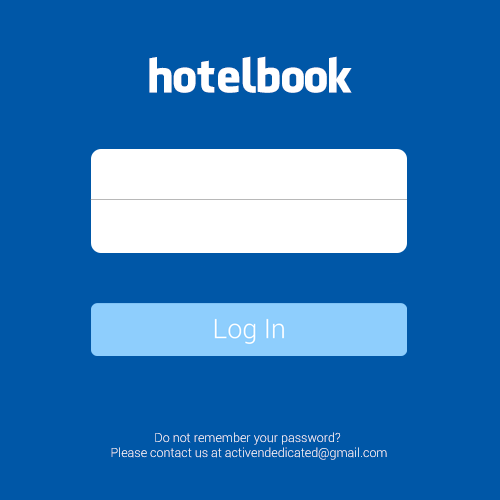
<style>
.page{position:relative;width:500px;height:500px;background:#0057a7}
.page>*{position:absolute;margin:0}
.t1{font:45.8px "FacebookLetterFaces";color:#ffffff}
.t2{font:12.5px "Roboto-Light";color:#ffffff}
</style>
<div class="page">
<p class="t1" style="left:149px;top:56px;width:203px;height:37px">hotelbook</p>
<p class="t2" style="left:111px;top:432px;width:276px;height:28px;text-align:center">Do not remember your password? <br>Please contact us at activendedicated@gmail.com</p>
</div>
